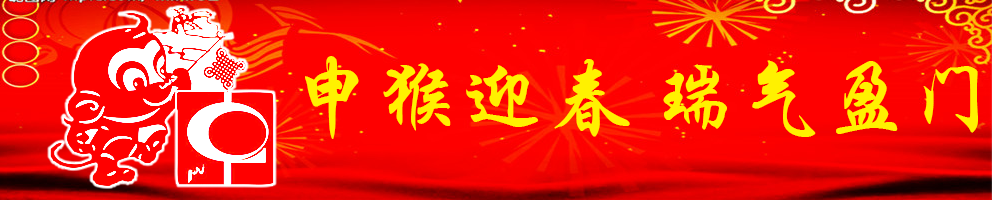
<style>
.page{position:relative;width:992px;height:200px}
.page>*{position:absolute;margin:0}
.t1{font:85.5px "STXingkai";color:#fff100}
</style>
<div class="page">
<p class="t1" style="left:305px;top:56px;width:673px;height:83px">申猴迎春 瑞气盈门</p>
</div>
